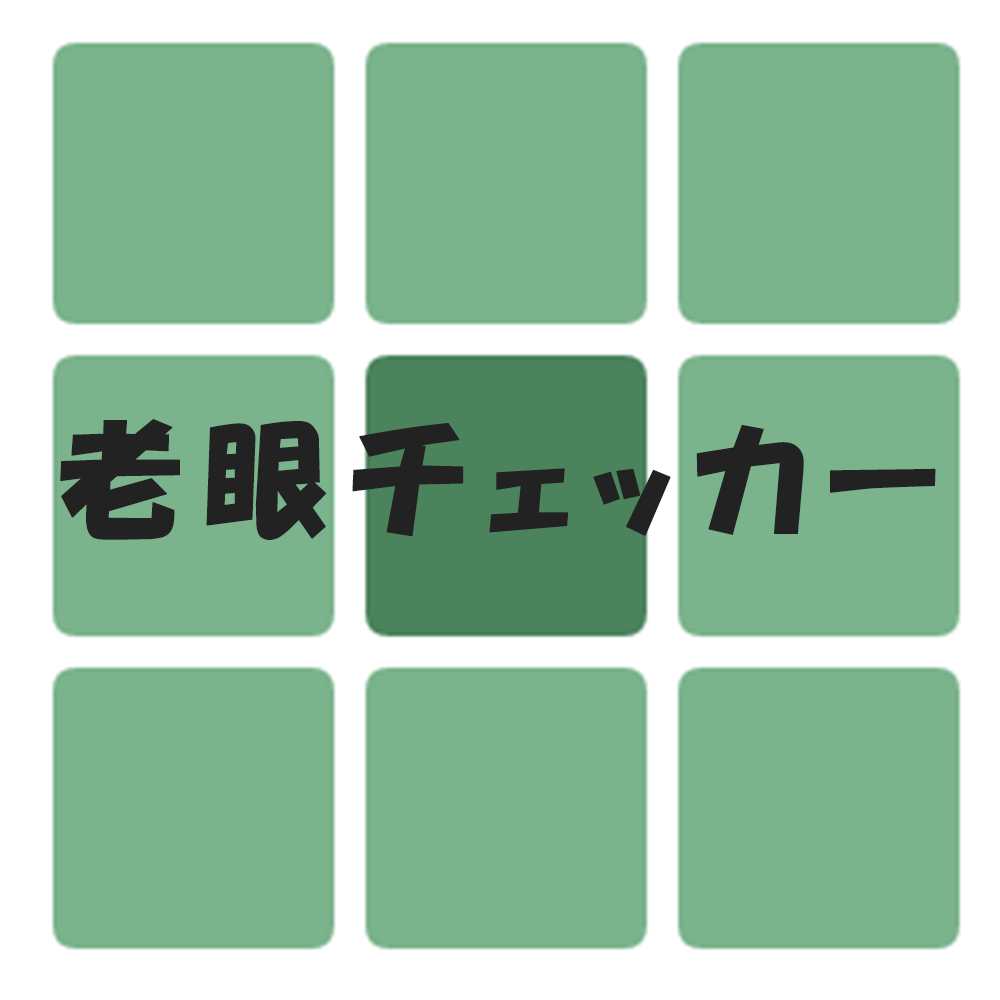
<style>
.page{position:relative;width:1000px;height:1000px;background:#7ab38c}
.page>*{position:absolute;margin:0}
.t1{font:125px "HGPSoeiKakupoptai";letter-spacing:0.14em;color:#222222;font-weight:bold}
</style>
<div class="page">
<p class="t1" style="left:60px;top:419px;width:876px;height:121px">老眼チェッカー</p>
</div>
